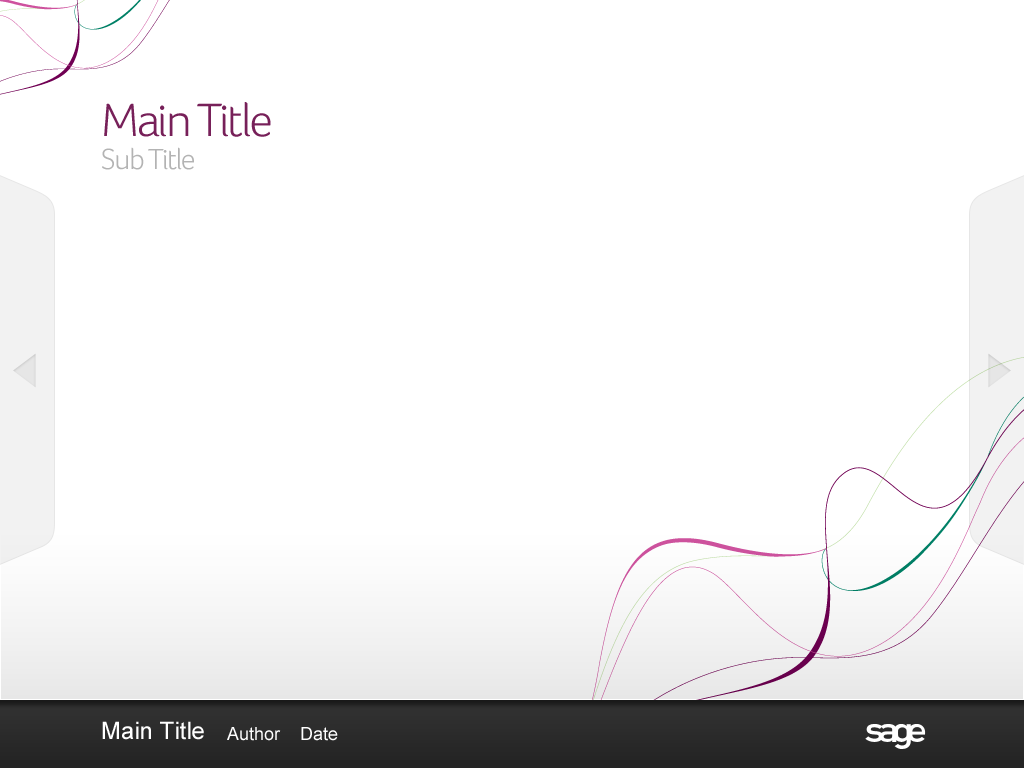
<style>
.page{position:relative;width:1024px;height:768px;background:#ffffff}
.page>*{position:absolute;margin:0}
.t1{font:48px "FocoLight-Regular";letter-spacing:-0.05em;color:#772059}
.t2{font:30px "FocoLight-Regular";letter-spacing:-0.05em;color:#b3b3b3}
.t3{font:24px "ArialMT";color:#ffffff}
.t4{font:18px "ArialMT";color:#ffffff}
</style>
<div class="page">
<p class="t1" style="left:104px;top:102px;width:167px;height:35px">Main Title</p>
<p class="t2" style="left:102px;top:147px;width:92px;height:23px">Sub Title</p>
<p class="t3" style="left:102px;top:721px;width:102px;height:19px">Main Title</p>
<p class="t4" style="left:227px;top:727px;width:54px;height:14px">Author</p>
<p class="t4" style="left:301px;top:727px;width:37px;height:14px">Date</p>
</div>
